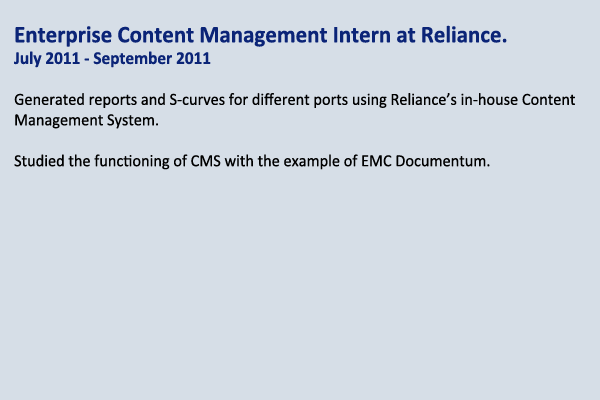
<style>
.page{position:relative;width:600px;height:400px;background:#d6dee7}
.page>*{position:absolute;margin:0}
.t1{font:17.1px "Calibri";color:#000000;scale:0.96 1}
.t2{font:24px "Calibri-Bold";color:#0b2477;scale:0.96 1}
.t3{font:18px "Calibri-Bold";color:#0b2477;scale:0.96 1}
</style>
<div class="page">
<p class="t1" style="left:14px;top:25px;width:561px;height:145px"><span class="t2">Enterprise Content Management Intern at Reliance.<br></span><span class="t3">July 2011 - September 2011<br></span><br>Generated reports and S-curves for different ports using Reliance’s in-house Content Management System.<br><br>Studied the functioning of CMS with the example of EMC Documentum.</p>
</div>
